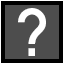
<style>
.page{position:relative;width:64px;height:64px;background:#4d4d4d}
.page>*{position:absolute;margin:0}
.t1{font:62.9px "ITCAvantGardePro-Md";letter-spacing:0.02em;color:#ffffff;text-transform:uppercase}
</style>
<div class="page">
<p class="t1" style="left:18px;top:8px;width:28px;height:48px">?</p>
</div>
